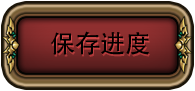
<style>
.page{position:relative;width:195px;height:91px}
.page>*{position:absolute;margin:0}
.t1{font:25.2px "AdobeHeitiStd-Regular";color:#000000}
</style>
<div class="page">
<p class="t1" style="left:51px;top:31px;width:98px;height:24px">保存进度</p>
</div>
